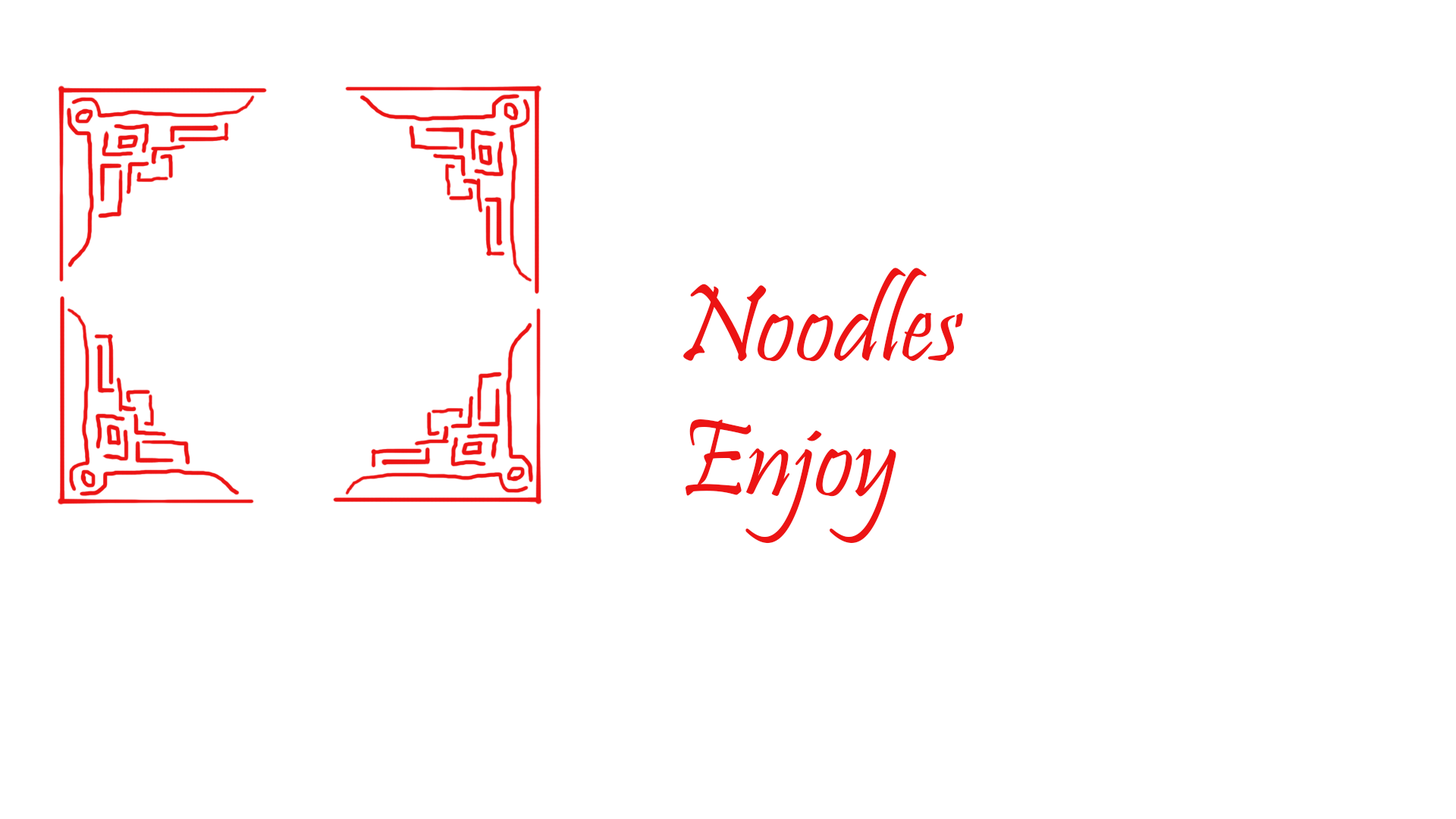
<style>
.page{position:relative;width:1456px;height:819px;background:#ffffff}
.page>*{position:absolute;margin:0}
.t1{font:112.4px "Pristina-Regular";color:#ec1414}
</style>
<div class="page">
<p class="t1" style="left:683px;top:268px;width:280px;height:276px">Noodles<br>Enjoy</p>
</div>
